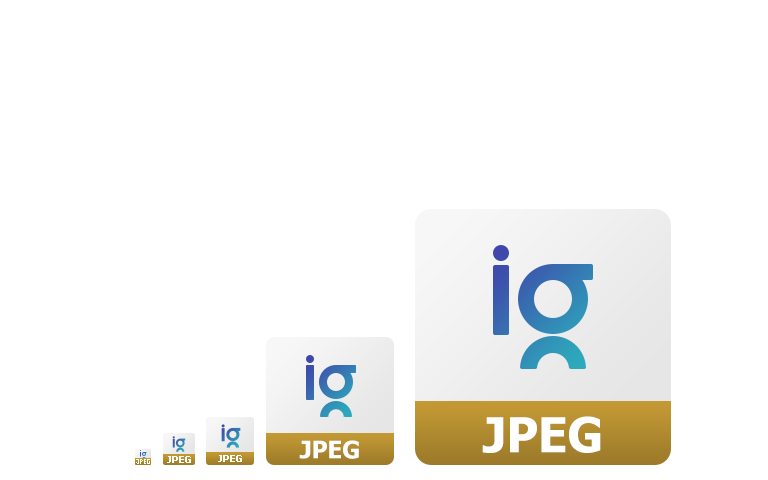
<style>
.page{position:relative;width:768px;height:480px;background:#ffffff}
.page>*{position:absolute;margin:0}
.t1{font:48px "Tahoma-Bold";color:#ffffff}
.t2{font:24px "Tahoma-Bold";color:#ffffff}
.t3{font:10px "Tahoma-Bold";color:#ffffff}
</style>
<div class="page">
<p class="t1" style="left:482px;top:416px;width:119px;height:37px">JPEG</p>
<p class="t2" style="left:299px;top:440px;width:60px;height:19px">JPEG</p>
<p class="t3" style="left:167px;top:456px;width:24px;height:7px">JPEG</p>
<p class="t3" style="left:218px;top:455px;width:24px;height:7px">JPEG</p>
</div>
